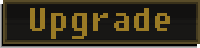
<style>
.page{position:relative;width:200px;height:48px;background:#181715}
.page>*{position:absolute;margin:0}
.t1{font:41px "DungGeunMo";letter-spacing:0.01em;color:#9a7a25}
</style>
<div class="page">
<p class="t1" style="left:30px;top:8px;width:140px;height:31px">Upgrade</p>
</div>
